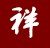
<style>
.page{position:relative;width:50px;height:48px;background:#7d0000}
.page>*{position:absolute;margin:0}
.t1{font:32.4px "Ò¶¸ùÓÑÃ«±ÊÐÐÊé¼òÌå";letter-spacing:0.2em;color:#ffffff}
</style>
<div class="page">
<p class="t1" style="left:10px;top:6px;width:29px;height:32px">祥</p>
</div>
